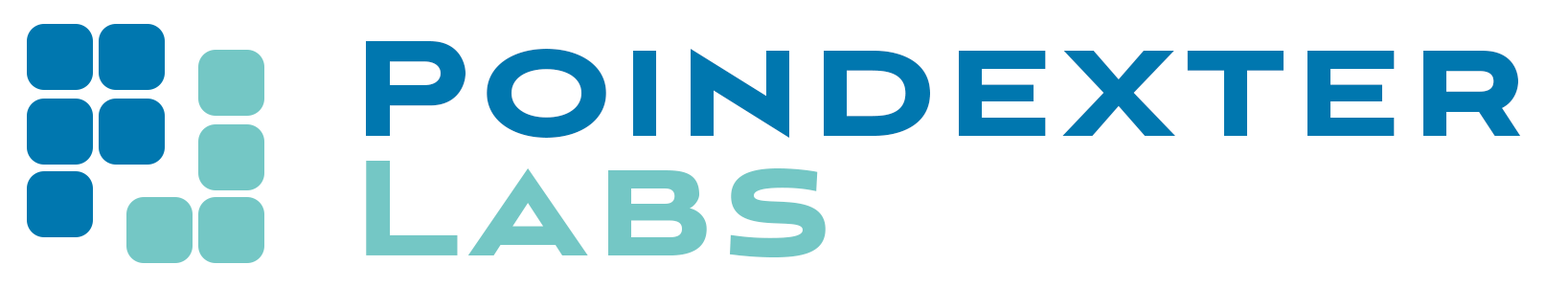
<style>
.page{position:relative;width:1568px;height:287px;background:#ffffff}
.page>*{position:absolute;margin:0}
.t1{font:170px "AvianoSansBlack";letter-spacing:0.04em;color:#0077af}
.t2{font:170px "AvianoSansBlack";letter-spacing:0.04em;color:#74c8c6}
</style>
<div class="page">
<p class="t1" style="left:366px;top:41px;width:1155px;height:97px">Poindexter</p>
<p class="t2" style="left:366px;top:161px;width:460px;height:97px">Labs</p>
</div>
